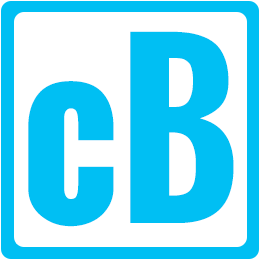
<style>
.page{position:relative;width:260px;height:260px;background:#00bff3}
.page>*{position:absolute;margin:0}
.t1{font:217.6px "Oswald-Bold";color:#00bff3}
</style>
<div class="page">
<p class="t1" style="left:28px;top:31px;width:206px;height:196px">cB</p>
</div>
